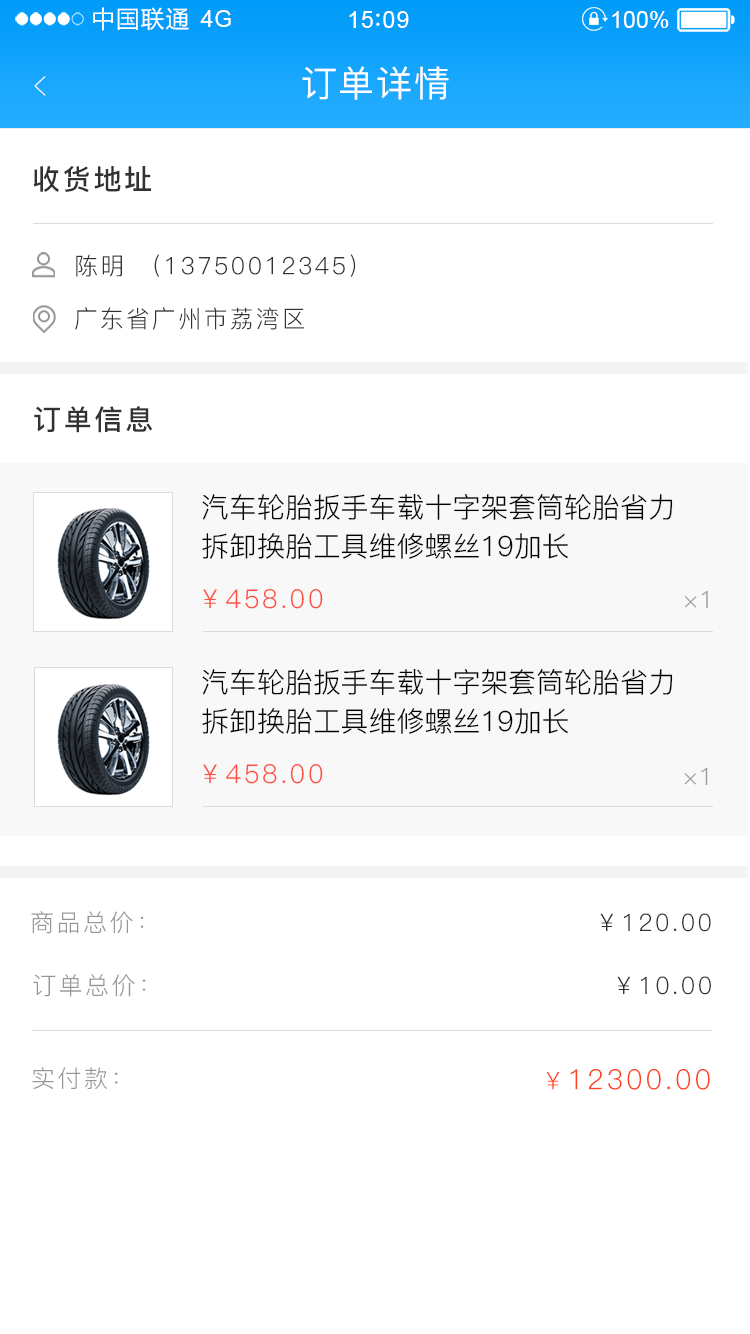
<style>
.page{position:relative;width:750px;height:1334px;background:#ffffff}
.page>*{position:absolute;margin:0}
.t1{font:23.4px "MicrosoftYaHei";letter-spacing:0.06em;color:#ffffff}
.t2{font:23.4px "ArialMT";letter-spacing:0.02em;color:#ffffff}
.t3{font:23.4px "ArialMT";letter-spacing:0.04em;color:#ffffff}
.t4{font:23.4px "ArialMT";color:#ffffff}
.t5{font:39px "PingFang-SC-ExtraLight";letter-spacing:0.1em;color:#ffffff;scale:0.51 1}
.t6{font:36px "PingFang-SC-Medium";letter-spacing:0.05em;color:#ffffff}
.t7{font:28px "PingFang-SC-Bold";letter-spacing:0.1em;color:#323232}
.t8{font:24px "PingFang-SC-Regular";letter-spacing:0.1em;color:#323232}
.t9{font:27.9px "PingFang-SC-Bold";letter-spacing:0.1em;color:#323232}
.t10{font:27.9px/38.9px "PingFang-SC-Regular";color:#000000}
.t11{font:26px "PingFang-SC-Regular";letter-spacing:0.1em;color:#ff4f41}
.t12{font:23.9px "PingFang-SC-Regular";letter-spacing:0.05em;color:#9c9c9c}
.t13{font:24px "PingFang-SC-Regular";letter-spacing:0.05em;color:#9c9c9c}
.t14{font:24.1px "PingFang-SC-Regular";letter-spacing:0.1em;color:#969696}
.t15{font:24.2px "PingFang-SC-Regular";letter-spacing:0.1em;color:#323232}
.t16{font:24.3px "PingFang-SC-Regular";letter-spacing:0.1em;color:#969696}
.t17{font:23.7px "PingFang-SC-Regular";letter-spacing:0.1em;color:#969696}
.t18{font:27.9px "PingFang-SC-Regular";letter-spacing:0.1em;color:#ff4526}
.t19{font:24.1px "PingFang-SC-Regular";letter-spacing:0.1em;color:#ff4526}
</style>
<div class="page">
<p class="t1" style="left:93px;top:7px;width:96px;height:24px">中国联通</p>
<p class="t2" style="left:200px;top:10px;width:31px;height:17px">4G</p>
<p class="t3" style="left:349px;top:11px;width:60px;height:17px">15 09</p>
<p class="t4" style="left:612px;top:11px;width:57px;height:17px">100%</p>
<p class="t5" style="left:34px;top:76px;width:12px;height:20px;rotate:180deg">&gt;</p>
<p class="t6" style="left:302px;top:66px;width:147px;height:34px">订单详情</p>
<p class="t7" style="left:33px;top:166px;width:118px;height:26px">收货地址</p>
<p class="t8" style="left:76px;top:254px;width:280px;height:23px">陈明 （13750012345）</p>
<p class="t8" style="left:75px;top:307px;width:229px;height:23px">广东省广州市荔湾区</p>
<p class="t9" style="left:34px;top:406px;width:119px;height:27px">订单信息</p>
<p class="t10" style="left:202px;top:493px;width:471px;height:66px">汽车轮胎扳手车载十字架套筒轮胎省力<br>拆卸换胎工具维修螺丝19加长</p>
<p class="t11" style="left:203px;top:588px;width:120px;height:21px">￥458.00</p>
<p class="t12" style="left:684px;top:591px;width:24px;height:17px">×1</p>
<p class="t10" style="left:202px;top:668px;width:471px;height:66px">汽车轮胎扳手车载十字架套筒轮胎省力<br>拆卸换胎工具维修螺丝19加长</p>
<p class="t11" style="left:203px;top:763px;width:120px;height:21px">￥458.00</p>
<p class="t13" style="left:684px;top:768px;width:24px;height:17px">×1</p>
<p class="t14" style="left:31px;top:911px;width:113px;height:23px">商品总价：</p>
<p class="t15" style="left:600px;top:913px;width:111px;height:19px">￥120.00</p>
<p class="t16" style="left:33px;top:974px;width:113px;height:23px">订单总价：</p>
<p class="t15" style="left:617px;top:976px;width:94px;height:19px">￥10.00</p>
<p class="t17" style="left:32px;top:1067px;width:86px;height:23px">实付款：</p>
<p class="t18" style="left:546px;top:1069px;width:164px;height:21px"><span class="t19">￥</span>12300.00</p>
</div>
